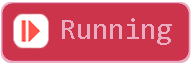
<style>
.page{position:relative;width:192px;height:64px;background:#cb344a}
.page>*{position:absolute;margin:0}
.t1{font:29.9px "Consolas";color:#eaacc0}
</style>
<div class="page">
<p class="t1" style="left:62px;top:18px;width:110px;height:27px">Running</p>
</div>
